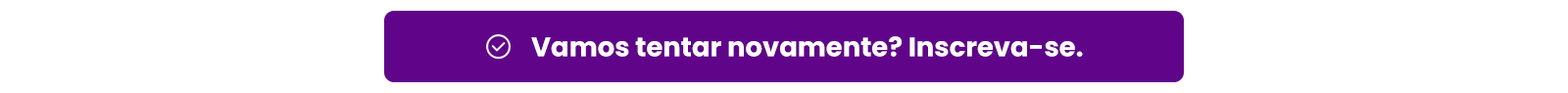
<style>
.page{position:relative;width:1568px;height:93px;background:#ffffff}
.page>*{position:absolute;margin:0}
.t1{font:26.9px "Poppins-Bold";color:#ffffff}
</style>
<div class="page">
<p class="t1" style="left:531px;top:36px;width:552px;height:21px">Vamos tentar novamente? Inscreva-se.</p>
</div>
